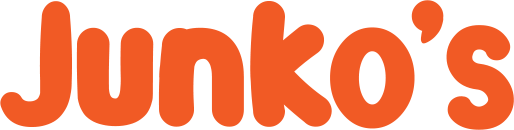
<style>
.page{position:relative;width:514px;height:130px;background:#f15a25}
.page>*{position:absolute;margin:0}
.t1{font:180px "SquishyBlueRegular";color:#f15a25}
</style>
<div class="page">
<p class="t1" style="left:0px;top:0px;width:514px;height:130px">Junko’s</p>
</div>
